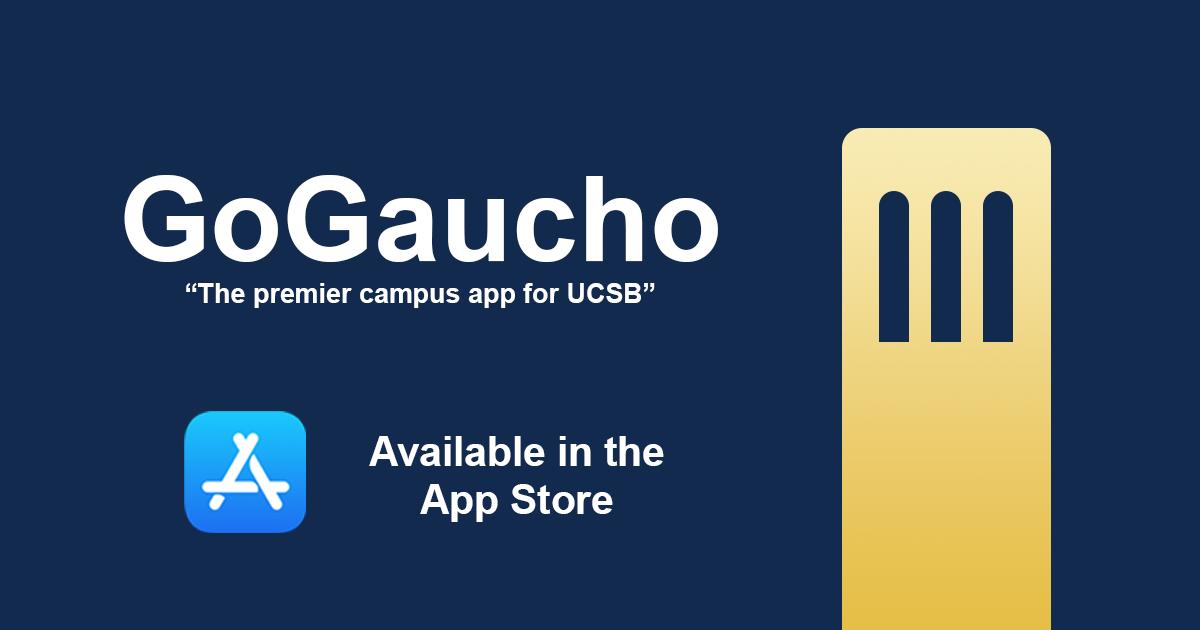
<style>
.page{position:relative;width:1200px;height:630px;background:#132a4f}
.page>*{position:absolute;margin:0}
.t1{font:118px "Arial-BoldMT";color:#ffffff}
.t2{font:26.9px "Arial-BoldMT";color:#ffffff}
.t3{font:40.5px "Arial-BoldMT";color:#ffffff}
</style>
<div class="page">
<p class="t1" style="left:124px;top:175px;width:594px;height:87px">GoGaucho</p>
<p class="t2" style="left:186px;top:283px;width:469px;height:25px">“The premier campus app for UCSB”</p>
<p class="t3" style="left:369px;top:436px;width:295px;height:86px;text-align:center">Available in the<br>App Store</p>
</div>
